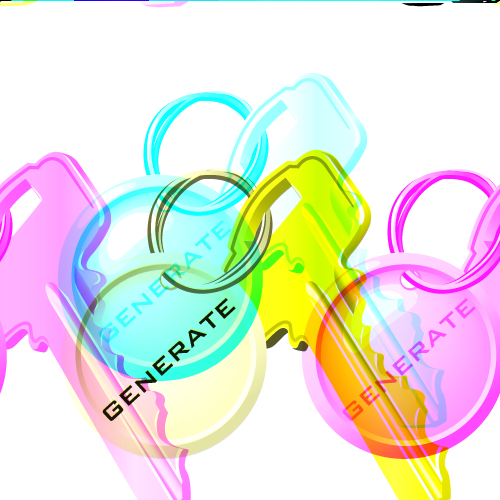
<style>
.page{position:relative;width:500px;height:500px;background:#ffffff}
.page>*{position:absolute;margin:0}
.t1{font:34px "BankGothic-Medium"}
</style>
<div class="page">
<p class="t1" style="left:98px;top:219px;width:134px;height:123px;rotate:-43deg">generate</p>
</div>
